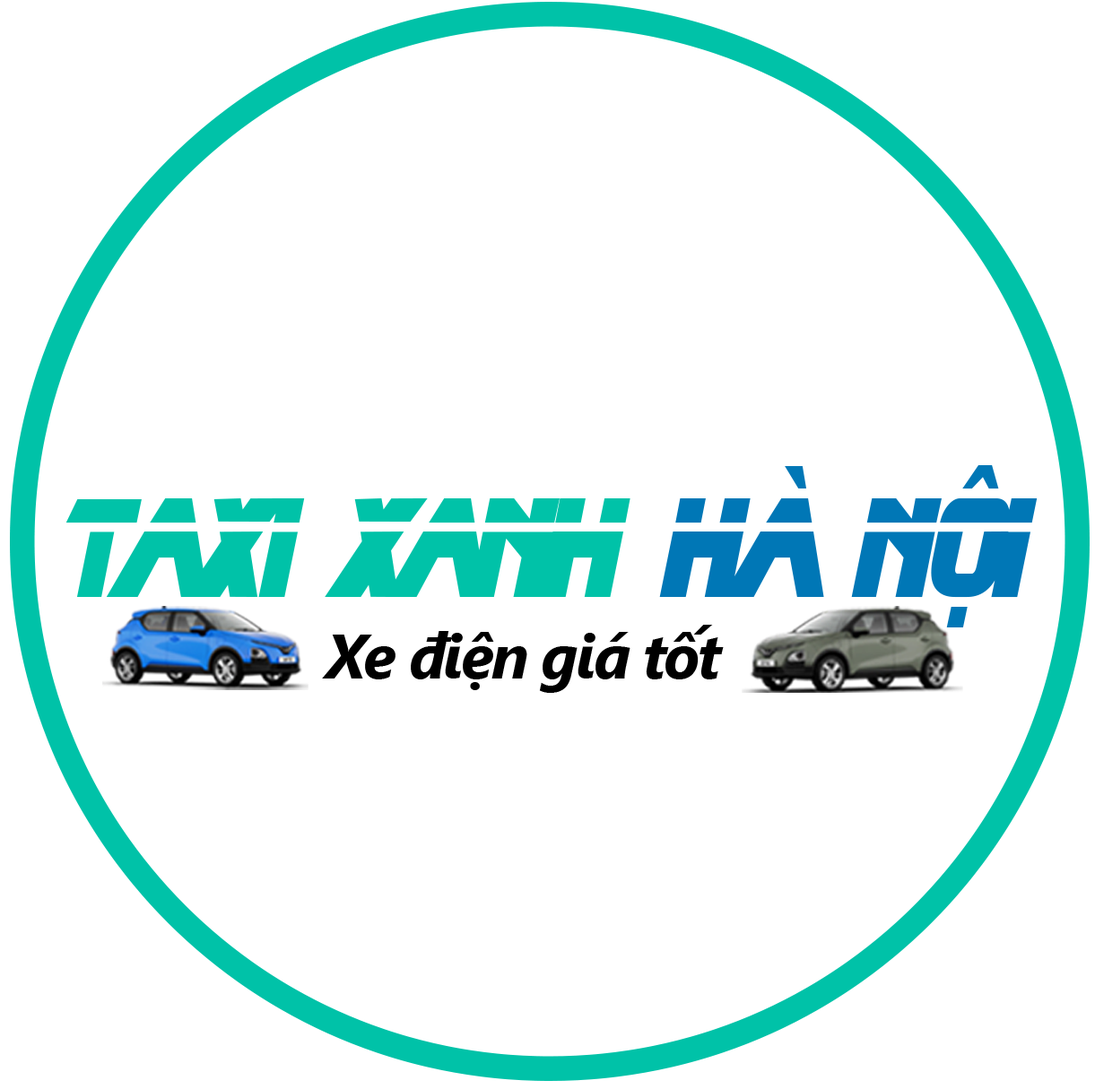
<style>
.page{position:relative;width:1095px;height:1089px;background:#ffffff}
.page>*{position:absolute;margin:0}
.t1{font:142.8px "SVN-BladeRunner";letter-spacing:-0.1em;color:#00c2a8;scale:0.74 1}
.t2{font:142.8px "SVN-BladeRunner";letter-spacing:-0.1em;color:#0077b6;scale:0.74 1}
.t3{font:62.9px "SVN-SegoeUIBoldItalic";letter-spacing:-0.04em;color:#000000}
</style>
<div class="page">
<p class="t1" style="left:65px;top:465px;width:972px;height:163px">TAXI xanh <span class="t2">hà nội</span></p>
<p class="t3" style="left:322px;top:625px;width:402px;height:68px">Xe điện giá tốt</p>
</div>
